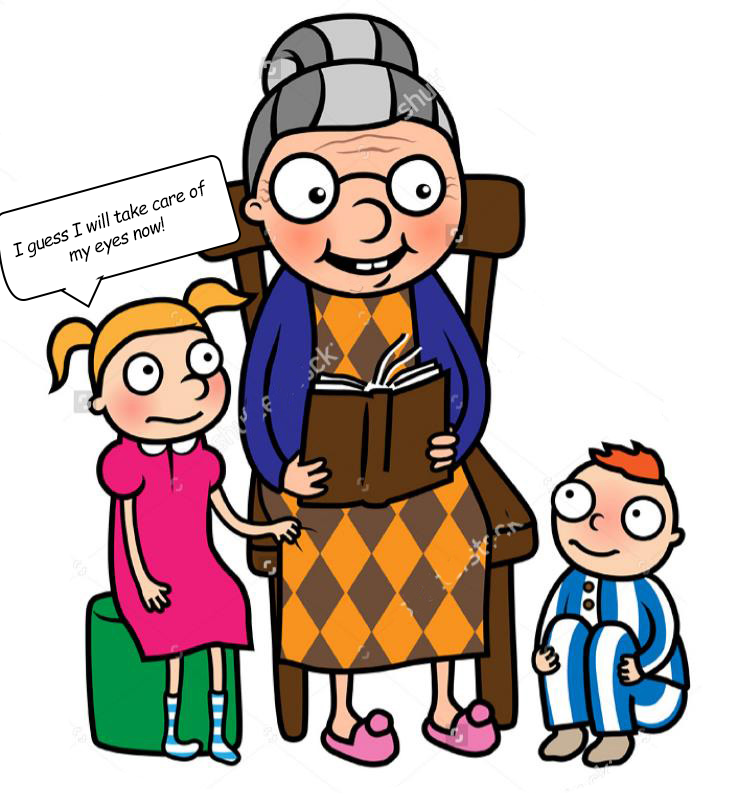
<style>
.page{position:relative;width:741px;height:794px;background:#ffffff}
.page>*{position:absolute;margin:0}
.t1{font:18.1px "ComicSansMS-Italic";letter-spacing:-0.035em;color:#000000}
</style>
<div class="page">
<p class="t1" style="left:13px;top:179px;width:192px;height:83px;rotate:-19deg">I guess I will take care of my eyes now!</p>
</div>
